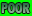
<style>
.page{position:relative;width:32px;height:16px;background:#00ff00}
.page>*{position:absolute;margin:0}
.t1{font:13.5px "Arial-Black";scale:0.66 1}
</style>
<div class="page">
<p class="t1" style="left:1px;top:3px;width:29px;height:10px">POOR</p>
</div>
